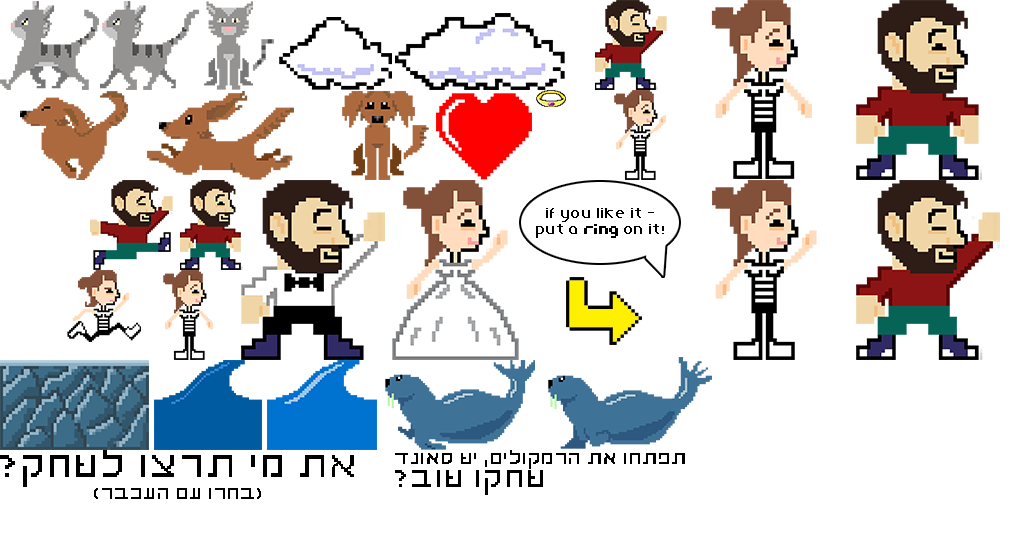
<style>
.page{position:relative;width:1019px;height:540px;background:#ffffff}
.page>*{position:absolute;margin:0}
.t1{font:14px "Stanger";color:#000000;font-weight:bold}
.t2{font:14px "StangerBold";color:#000000;font-weight:bold}
.t3{font:36px "Stanger";color:#000000;font-weight:bold}
.t4{font:18px "Stanger";color:#000000;font-weight:bold}
.t5{font:28.5px "Stanger";color:#000000;font-weight:bold}
</style>
<div class="page">
<p class="t1" style="left:536px;top:208px;width:128px;height:30px;text-align:center">if you like it -<br>put a <span class="t2">ring</span> on it!</p>
<p class="t3" style="left:0px;top:450px;width:354px;height:49px;text-align:center">את מי תרצו לשחק?<br><span class="t4">(בחרו עם העכבר)</span></p>
<p class="t4" style="left:395px;top:450px;width:290px;height:19px">תפתחו את הרמקולים, יש סאונד</p>
<p class="t5" style="left:395px;top:470px;width:148px;height:25px">שחקו שוב?</p>
</div>
